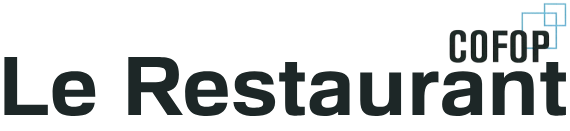
<style>
.page{position:relative;width:570px;height:131px;background:#ffffff}
.page>*{position:absolute;margin:0}
.t1{font:80.8px "FamiliarPro-Bold";color:#1d2727;scale:1.06 1}
</style>
<div class="page">
<p class="t1" style="left:4px;top:57px;width:562px;height:60px">Le Restaurant</p>
</div>
